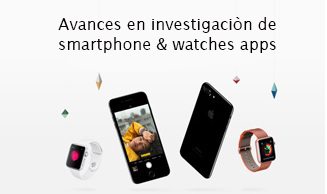
<style>
.page{position:relative;width:327px;height:194px;background:#fafafa}
.page>*{position:absolute;margin:0}
.t1{font:12px "LucidaSans";color:#060000}
</style>
<div class="page">
<p class="t1" style="left:58px;top:17px;width:218px;height:36px;text-align:center">Avances en investigaciòn de smartphone &amp; watches apps</p>
</div>
